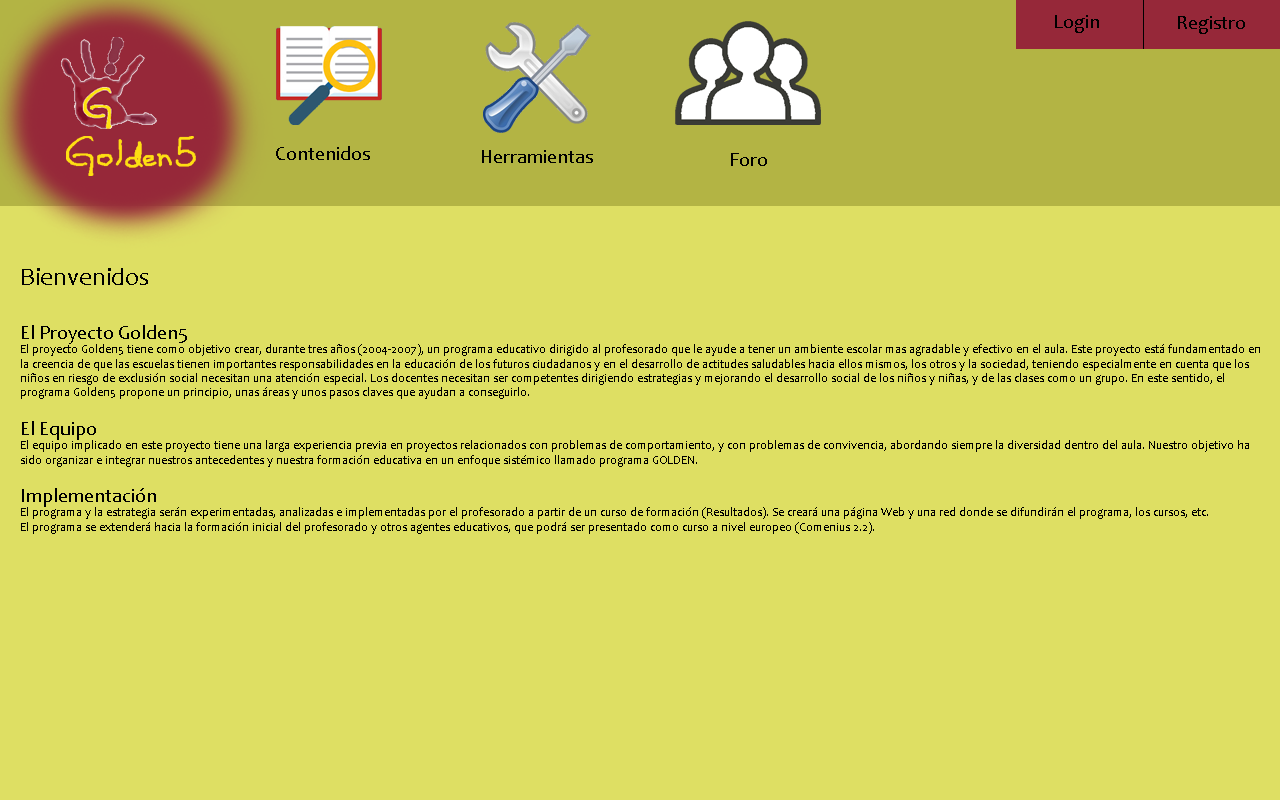
<style>
.page{position:relative;width:1280px;height:800px;background:#dedf63}
.page>*{position:absolute;margin:0}
.t1{font:20px "Candara";color:#000000}
.t2{font:12px "Candara";color:#000000}
.t3{font:25px "Candara";color:#000000}
</style>
<div class="page">
<p class="t1" style="left:1055px;top:15px;width:44px;height:18px">Login</p>
<p class="t1" style="left:1178px;top:16px;width:67px;height:18px">Registro</p>
<p class="t1" style="left:276px;top:146px;width:94px;height:14px">Contenidos</p>
<p class="t1" style="left:482px;top:150px;width:111px;height:13px">Herramientas</p>
<p class="t1" style="left:731px;top:153px;width:36px;height:13px">Foro</p>
<p class="t2" style="left:21px;top:268px;width:1239px;height:266px"><span class="t3">Bienvenidos<br><br></span><span class="t1">El Proyecto Golden5<br></span>El proyecto Golden5 tiene como objetivo crear, durante tres años (2004-2007), un programa educativo dirigido al profesorado que le ayude a tener un ambiente escolar mas agradable y efectivo en el aula. Este proyecto está fundamentado en <br>la creencia de que las escuelas tienen importantes responsabilidades en la educación de los futuros ciudadanos y en el desarrollo de actitudes saludables hacia ellos mismos, los otros y la sociedad, teniendo especialmente en cuenta que los <br>niños en riesgo de exclusión social necesitan una atención especial. Los docentes necesitan ser competentes dirigiendo estrategias y mejorando el desarrollo social de los niños y niñas, y de las clases como un grupo. En este sentido, el <br>programa Golden5 propone un principio, unas áreas y unos pasos claves que ayudan a conseguirlo.<br><br><span class="t1">El Equipo<br></span>El equipo implicado en este proyecto tiene una larga experiencia previa en proyectos relacionados con problemas de comportamiento, y con problemas de convivencia, abordando siempre la diversidad dentro del aula. Nuestro objetivo ha <br>sido organizar e integrar nuestros antecedentes y nuestra formación educativa en un enfoque sistémico llamado programa GOLDEN.<br><br><span class="t1">Implementación<br></span>El programa y la estrategia serán experimentadas, analizadas e implementadas por el profesorado a partir de un curso de formación (Resultados). Se creará una página Web y una red donde se difundirán el programa, los cursos, etc. <br>El programa se extenderá hacia la formación inicial del profesorado y otros agentes educativos, que podrá ser presentado como curso a nivel europeo (Comenius 2.2).</p>
</div>
